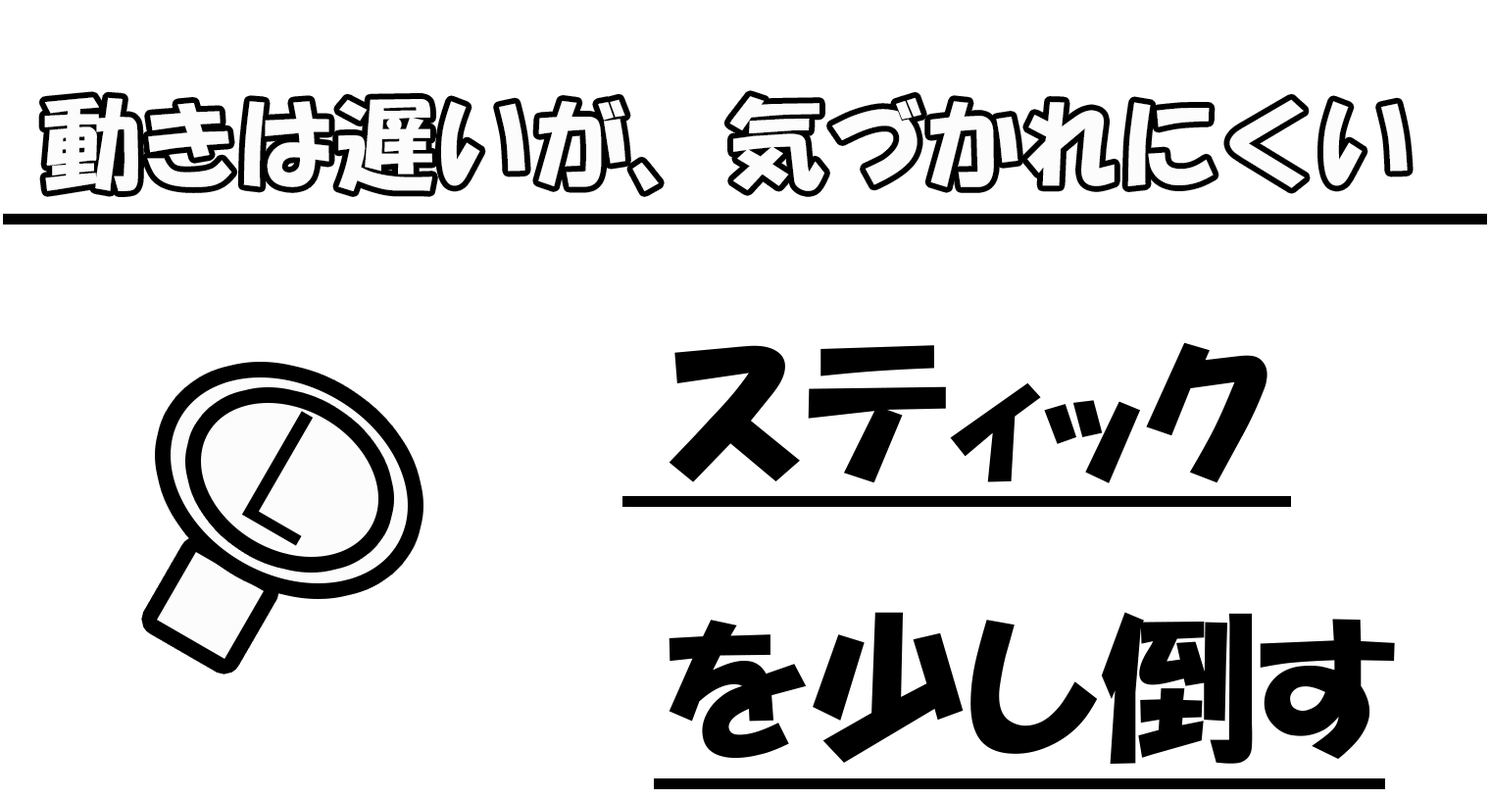
<style>
.page{position:relative;width:1490px;height:800px;background:#ffffff}
.page>*{position:absolute;margin:0}
.t1{font:98.1px "HGSoeiKakupoptai";color:#fcfcfc}
.t2{font:156.9px "HGPSoeiKakupoptai";color:#000000}
</style>
<div class="page">
<p class="t1" style="left:44px;top:96px;width:1364px;height:95px">動きは遅いが、気づかれにくい</p>
<p class="t2" style="left:669px;top:342px;width:726px;height:422px">スティック<br>を少し倒す</p>
</div>
